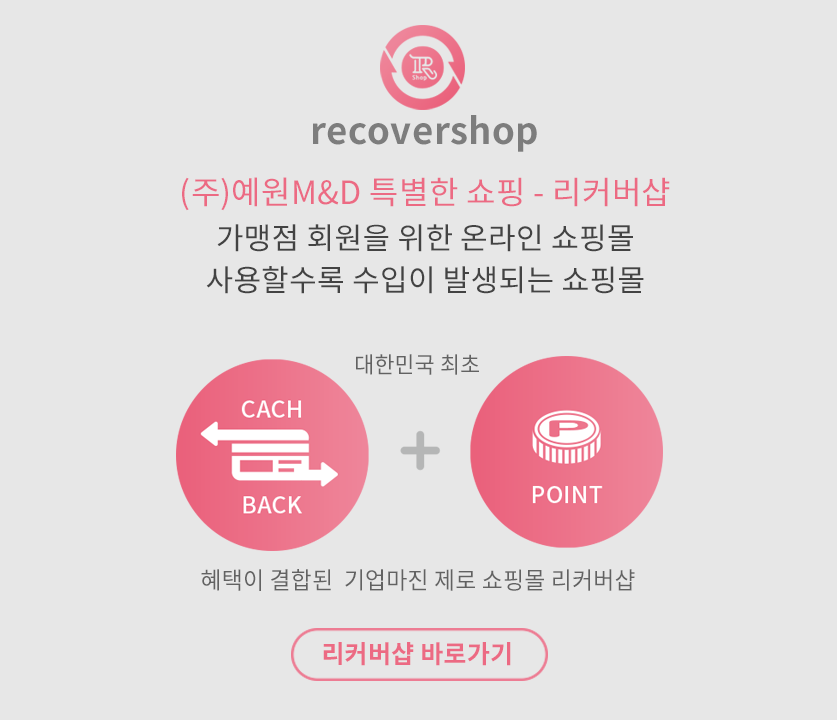
<style>
.page{position:relative;width:837px;height:720px;background:#e7e7e7}
.page>*{position:absolute;margin:0}
.t1{font:36.6px "NotoSansCJKkr-Bold";letter-spacing:0.01em;color:#7d7d7d}
.t2{font:32px/40px "NotoSansCJKkr-Regular";letter-spacing:0.01em;color:#ec6a83}
.t3{font:30px/45px "NotoSansCJKkr-Regular";letter-spacing:0.01em;color:#434343}
.t4{font:30px/42px "NotoSansCJKkr-Regular";letter-spacing:0.01em;color:#434343}
.t5{font:22.8px "NotoSansCJKkr-Regular";letter-spacing:0.01em;color:#626262;scale:0.95 1}
.t6{font:24px "NotoSansCJKkr-Regular";letter-spacing:0.01em;color:#626262;scale:0.95 1}
.t7{font:25px "NotoSansCJKkr-Bold";letter-spacing:0.01em;color:#ec6a83}
</style>
<div class="page">
<p class="t1" style="left:313px;top:115px;width:224px;height:37px">recovershop</p>
<p class="t2" style="left:182px;top:177px;width:488px;height:117px;text-align:center">(주)예원M&amp;D 특별한 쇼핑 - 리커버샵 <br><span class="t3">가맹점 회원을 위한 온라인 쇼핑몰<br></span><span class="t4">사용할수록 수입이 발생되는 쇼핑몰</span></p>
<p class="t5" style="left:356px;top:354px;width:123px;height:21px">대한민국 최초</p>
<p class="t6" style="left:201px;top:569px;width:434px;height:22px">혜택이 결합된  기업마진 제로 쇼핑몰 리커버샵</p>
<p class="t7" style="left:323px;top:642px;width:188px;height:24px">리커버샵 바로가기</p>
</div>
